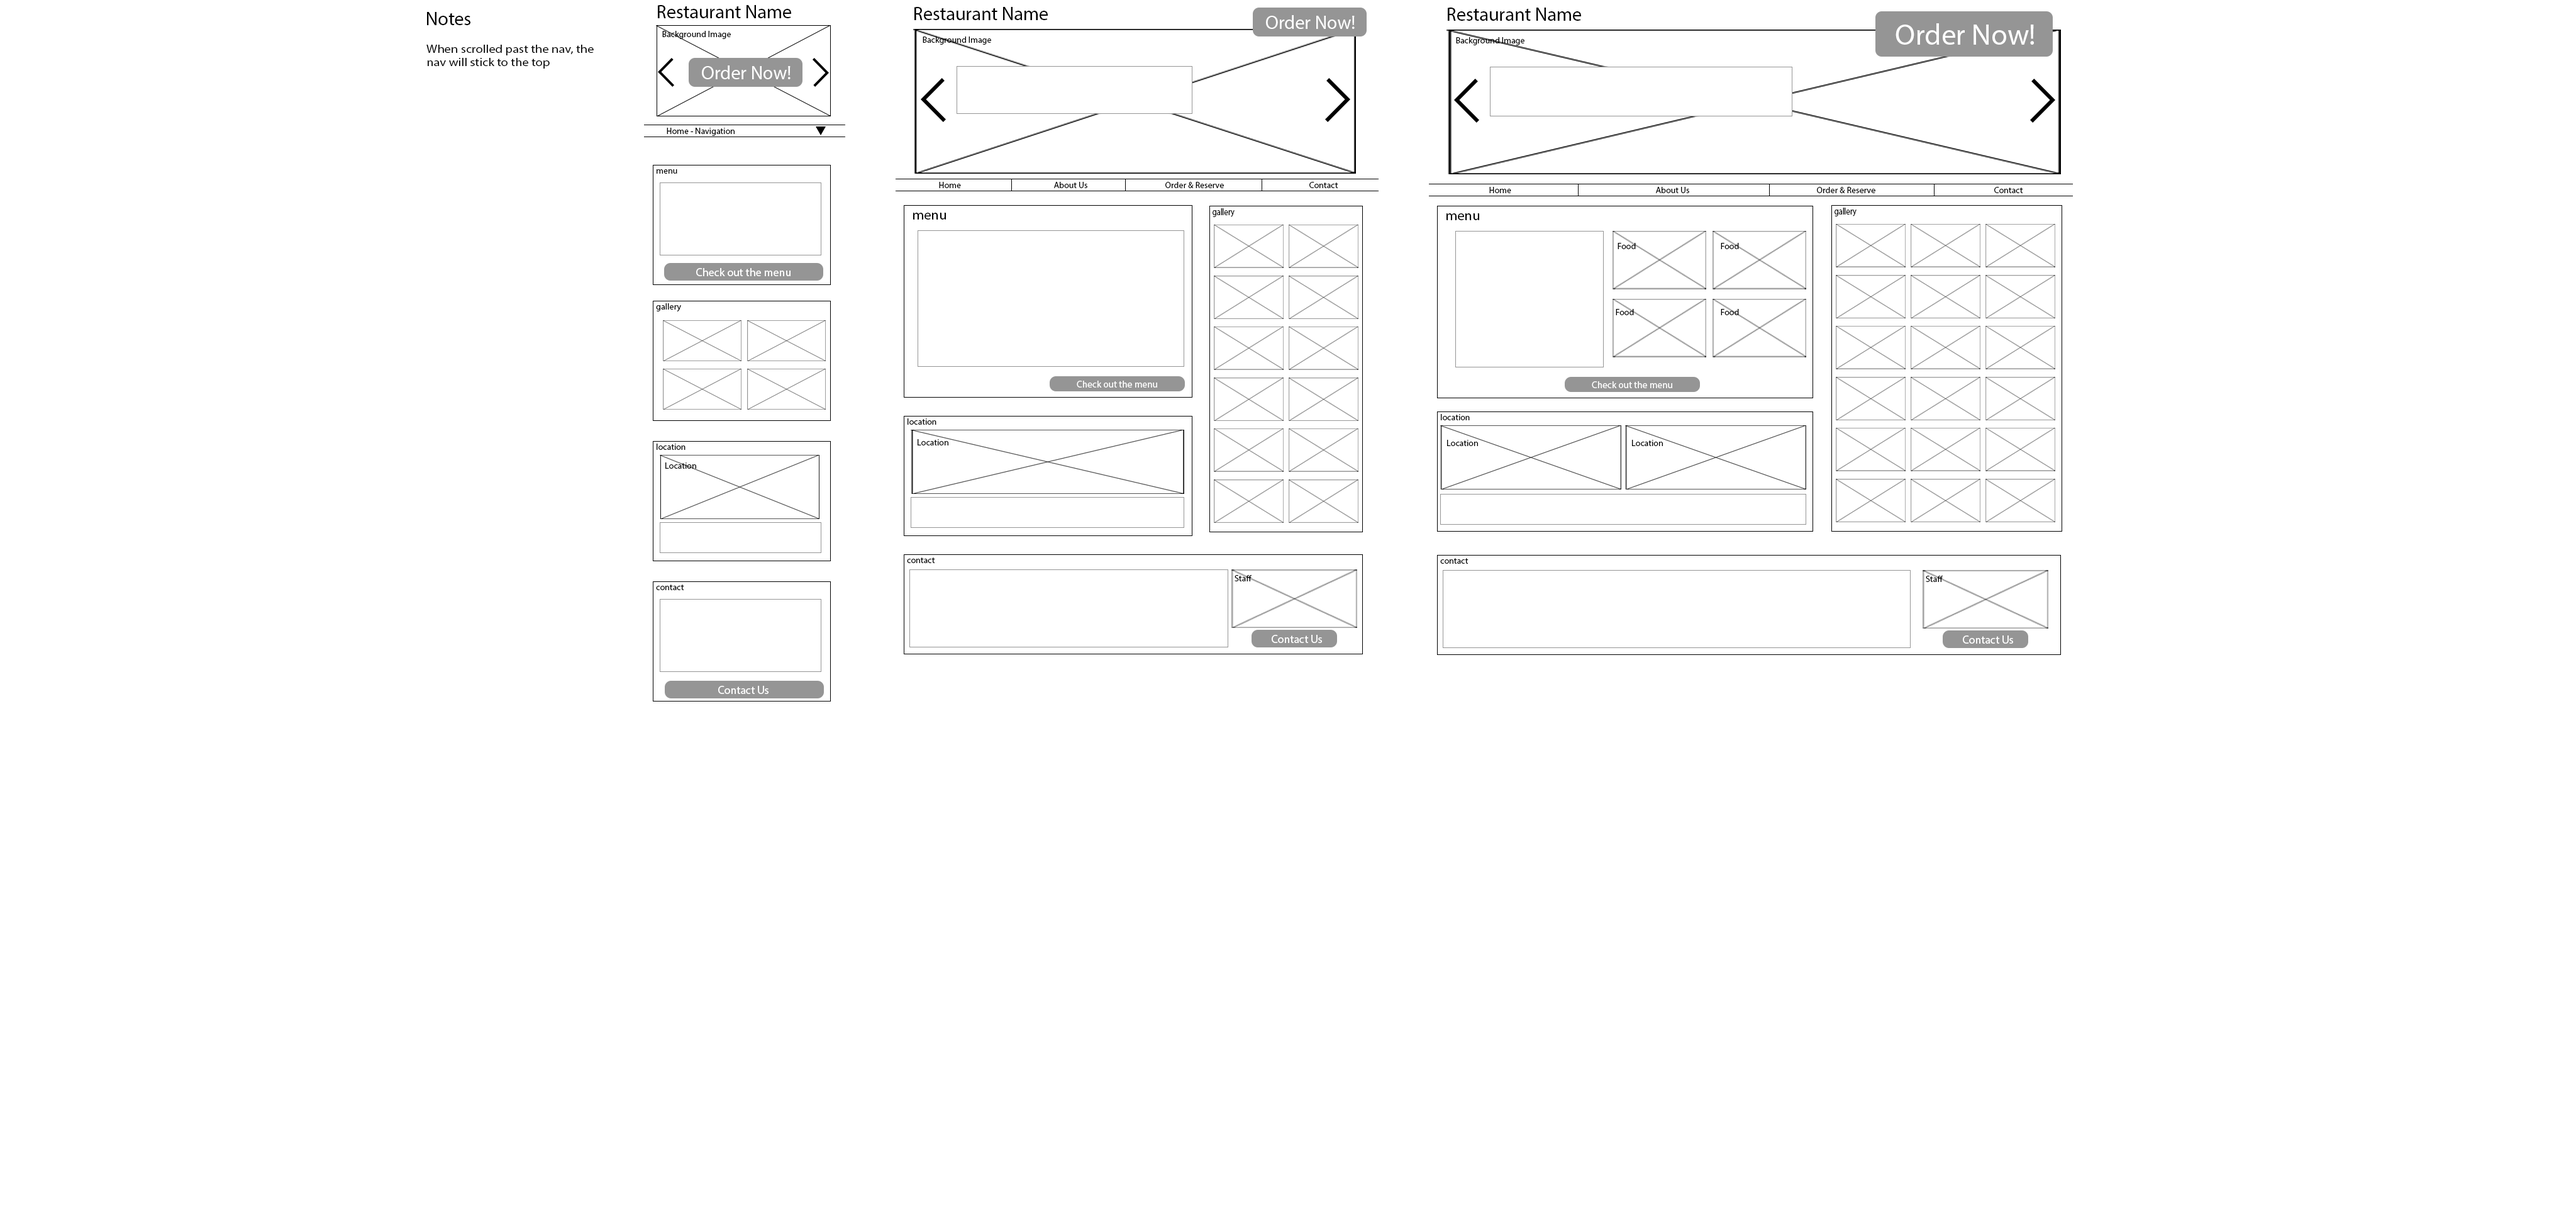
<style>
.page{position:relative;width:2576px;height:1208px;background:#ffffff}
.page>*{position:absolute;margin:0}
.t1{font:18.9px "MyriadPro-Regular";color:#000000}
.t2{font:18.9px "MyriadPro-Regular";color:#ffffff}
.t3{font:29.5px "MyriadPro-Regular";color:#ffffff}
.t4{font:8.8px "MyriadPro-Regular";color:#000000}
.t5{font:11.3px "MyriadPro-Regular";color:#000000;scale:1.14 1}
.t6{font:9.3px "MyriadPro-Regular";color:#000000;scale:0.84 1}
.t7{font:14.1px "MyriadPro-Regular";color:#000000}
.t8{font:11.3px "MyriadPro-Regular";color:#ffffff}
.t9{font:9.7px "MyriadPro-Regular";color:#ffffff}
</style>
<div class="page">
<p class="t1" style="left:658px;top:5px;width:133px;height:13px">Restaurant Name</p>
<p class="t1" style="left:427px;top:12px;width:43px;height:13px">Notes</p>
<p class="t1" style="left:914px;top:7px;width:134px;height:13px">Restaurant Name</p>
<p class="t2" style="left:1266px;top:15px;width:89px;height:14px">Order Now!</p>
<p class="t1" style="left:1448px;top:8px;width:133px;height:13px">Restaurant Name</p>
<p class="t3" style="left:1896px;top:23px;width:138px;height:22px">Order Now!</p>
<p class="t4" style="left:662px;top:31px;width:69px;height:8px">Background Image</p>
<p class="t4" style="left:923px;top:36px;width:68px;height:9px">Background Image</p>
<p class="t4" style="left:1456px;top:37px;width:68px;height:8px">Background Image</p>
<p class="t5" style="left:426px;top:45px;width:168px;height:24px">When scrolled past the nav, the nav will stick to the top</p>
<p class="t2" style="left:702px;top:65px;width:89px;height:14px">Order Now!</p>
<p class="t4" style="left:667px;top:128px;width:68px;height:8px">Home - Navigation</p>
<p class="t4" style="left:657px;top:169px;width:20px;height:5px">menu</p>
<p class="t4" style="left:939px;top:182px;width:22px;height:6px">Home</p>
<p class="t4" style="left:1054px;top:182px;width:33px;height:6px">About Us</p>
<p class="t4" style="left:1165px;top:182px;width:59px;height:6px">Order &amp; Reserve</p>
<p class="t4" style="left:1309px;top:182px;width:29px;height:6px">Contact</p>
<p class="t4" style="left:1489px;top:187px;width:22px;height:6px">Home</p>
<p class="t4" style="left:1656px;top:187px;width:33px;height:6px">About Us</p>
<p class="t4" style="left:1817px;top:187px;width:58px;height:6px">Order &amp; Reserve</p>
<p class="t4" style="left:1994px;top:187px;width:29px;height:6px">Contact</p>
<p class="t6" style="left:1213px;top:208px;width:22px;height:9px">gallery</p>
<p class="t6" style="left:1835px;top:208px;width:22px;height:8px">gallery</p>
<p class="t7" style="left:913px;top:213px;width:33px;height:6px">menu</p>
<p class="t7" style="left:1446px;top:213px;width:33px;height:7px">menu</p>
<p class="t4" style="left:1618px;top:243px;width:18px;height:6px">Food</p>
<p class="t4" style="left:1721px;top:243px;width:18px;height:6px">Food</p>
<p class="t8" style="left:696px;top:268px;width:95px;height:8px">Check out the menu</p>
<p class="t4" style="left:656px;top:303px;width:25px;height:9px">gallery</p>
<p class="t4" style="left:1616px;top:309px;width:18px;height:6px">Food</p>
<p class="t4" style="left:1721px;top:309px;width:18px;height:6px">Food</p>
<p class="t9" style="left:1077px;top:380px;width:80px;height:7px">Check out the menu</p>
<p class="t9" style="left:1592px;top:381px;width:80px;height:7px">Check out the menu</p>
<p class="t4" style="left:1441px;top:414px;width:29px;height:6px">location</p>
<p class="t4" style="left:908px;top:418px;width:28px;height:7px">location</p>
<p class="t4" style="left:657px;top:443px;width:29px;height:7px">location</p>
<p class="t4" style="left:918px;top:439px;width:30px;height:6px">Location</p>
<p class="t4" style="left:1447px;top:440px;width:31px;height:6px">Location</p>
<p class="t4" style="left:1632px;top:440px;width:31px;height:6px">Location</p>
<p class="t4" style="left:665px;top:462px;width:31px;height:7px">Location</p>
<p class="t4" style="left:907px;top:557px;width:28px;height:6px">contact</p>
<p class="t4" style="left:1440px;top:558px;width:28px;height:6px">contact</p>
<p class="t4" style="left:1235px;top:575px;width:17px;height:6px">Staff</p>
<p class="t4" style="left:1926px;top:575px;width:17px;height:7px">Staff</p>
<p class="t4" style="left:656px;top:584px;width:28px;height:6px">contact</p>
<p class="t8" style="left:1272px;top:635px;width:50px;height:8px">Contact Us</p>
<p class="t8" style="left:1963px;top:635px;width:50px;height:8px">Contact Us</p>
<p class="t8" style="left:718px;top:686px;width:51px;height:8px">Contact Us</p>
</div>
